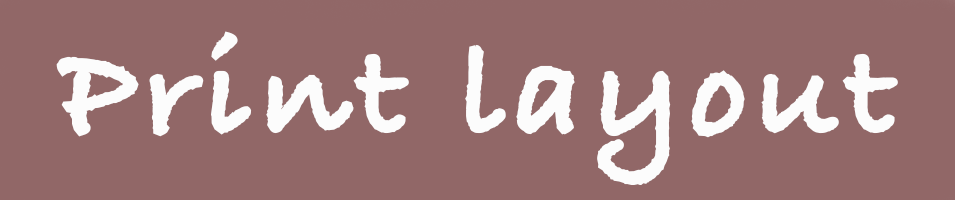
<style>
.page{position:relative;width:955px;height:200px;background:#916767}
.page>*{position:absolute;margin:0}
.t1{font:132.5px "BradleyHandITCTT-Bold";letter-spacing:0.05em;color:#fcfcfc;font-weight:bold}
</style>
<div class="page">
<p class="t1" style="left:56px;top:31px;width:842px;height:154px">Print layout</p>
</div>
